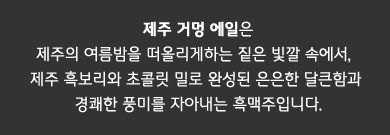
<style>
.page{position:relative;width:390px;height:135px;background:#333333}
.page>*{position:absolute;margin:0}
.t1{font:16px/25px "MICEGothic";color:#ffffff}
.t2{font:16px/25px "MICEGothicBold";color:#ffffff}
</style>
<div class="page">
<p class="t1" style="left:30px;top:21px;width:332px;height:92px;text-align:center"><span class="t2">제주 거멍 에일</span>은<br>제주의 여름밤을 떠올리게하는 짙은 빛깔 속에서,  <br>제주 흑보리와 초콜릿 밀로 완성된 은은한 달큰함과 <br>경쾌한 풍미를 자아내는 흑맥주입니다.</p>
</div>
